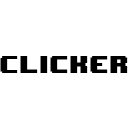
<style>
.page{position:relative;width:128px;height:128px;background:#ffffff}
.page>*{position:absolute;margin:0}
.t1{font:20px "8BITWONDERNominal";color:#000000}
</style>
<div class="page">
<p class="t1" style="left:0px;top:56px;width:128px;height:17px">Clicker</p>
</div>
